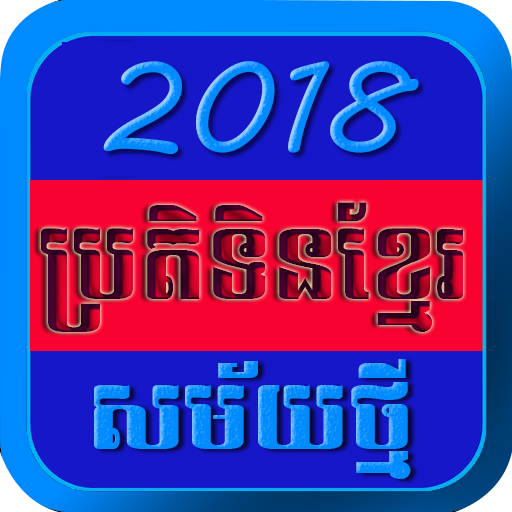
<style>
.page{position:relative;width:512px;height:512px;background:#1617c9}
.page>*{position:absolute;margin:0}
.t1{font:127px "MVBoli";color:#008aff}
.t2{font:96.4px "Angkor"}
.t3{font:88.1px "Angkor";color:#008aff;scale:1.09 1}
</style>
<div class="page">
<p class="t1" style="left:103px;top:61px;width:316px;height:94px">2018</p>
<p class="t2" style="left:41px;top:202px;width:422px;height:130px">ប្រតិទិនខែ្មរ</p>
<p class="t3" style="left:94px;top:359px;width:317px;height:120px">សម័យថ្មី</p>
</div>
